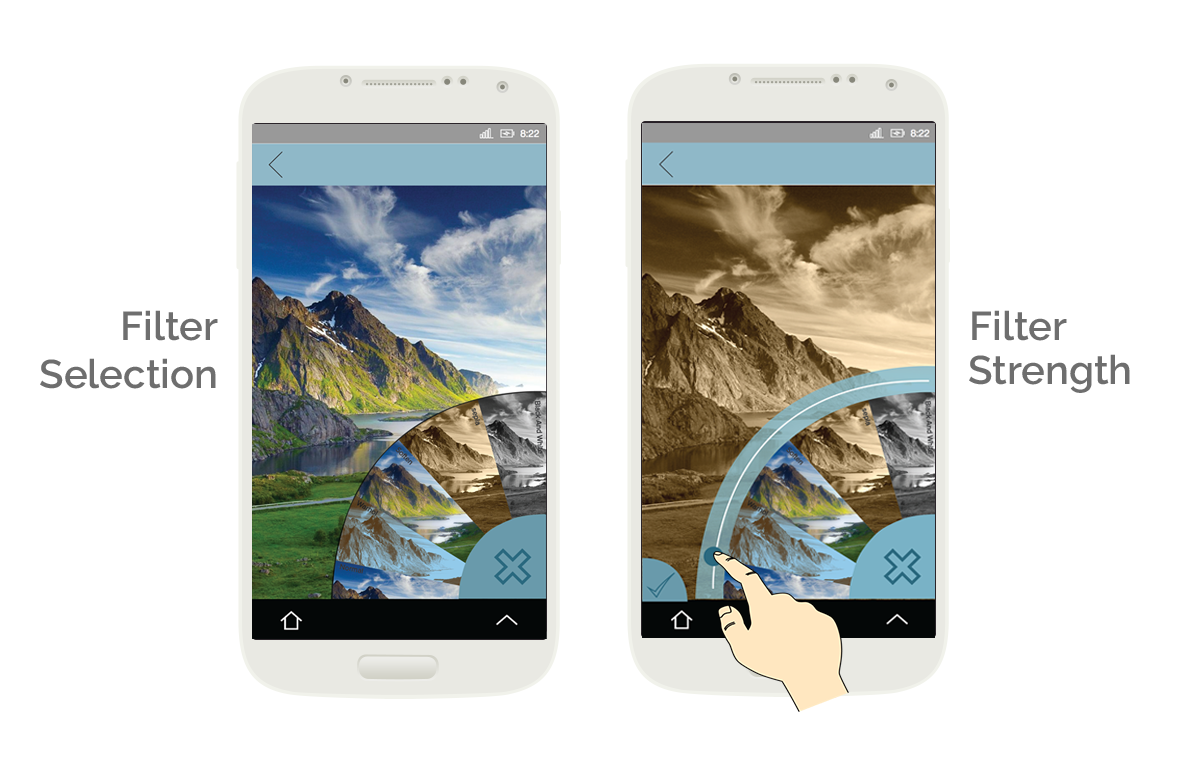
<style>
.page{position:relative;width:1199px;height:761px;background:#ffffff}
.page>*{position:absolute;margin:0}
.t1{font:40px "Raleway-SemiBold";color:#6e6e6e}
</style>
<div class="page">
<p class="t1" style="left:40px;top:310px;width:178px;height:79px">Filter <br>Selection</p>
<p class="t1" style="left:972px;top:310px;width:95px;height:31px">Filter</p>
<p class="t1" style="left:969px;top:354px;width:161px;height:39px">Strength</p>
</div>
